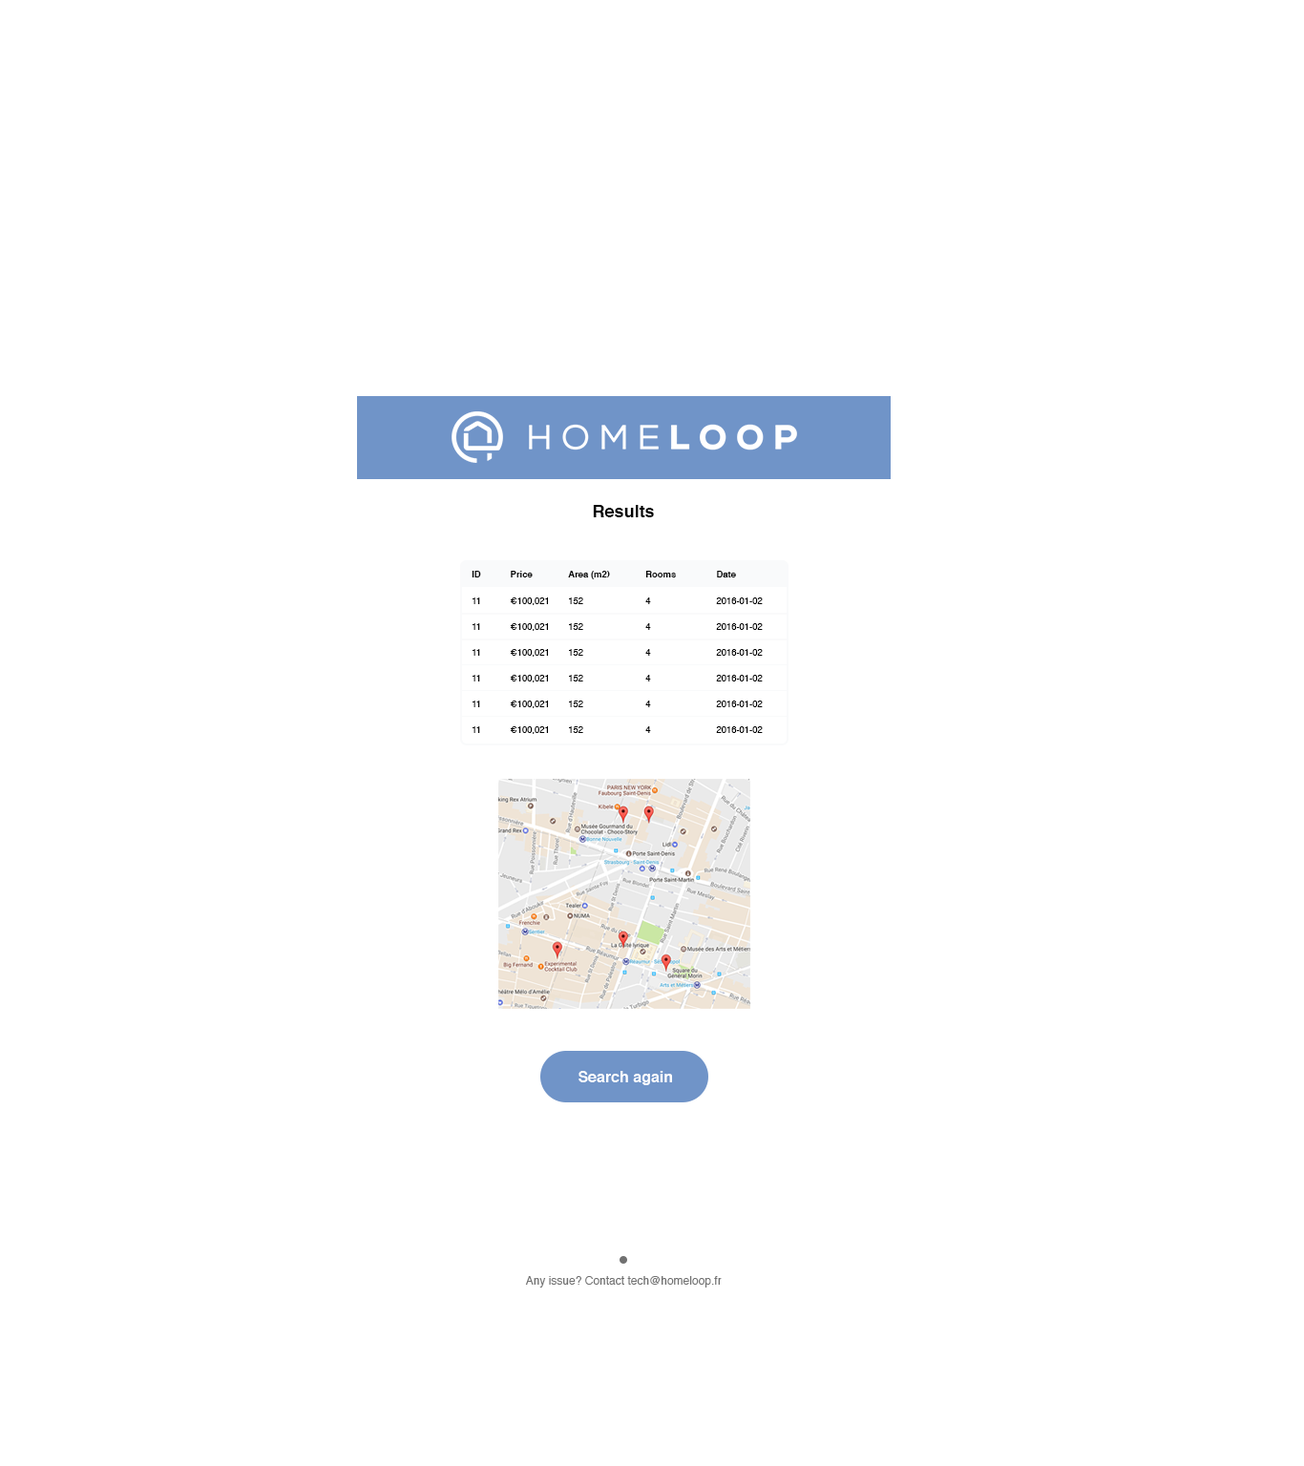
<style>
.page{position:relative;width:1304px;height:1466px;background:#ffffff}
.page>*{position:absolute;margin:0}
.t1{font:17.2px "Helvetica-Bold";color:#000000}
.t2{font:9px "Helvetica-Bold";color:#000000}
.t3{font:9px "Helvetica";color:#000000}
.t4{font:15.3px "Helvetica-Bold";color:#ffffff}
.t5{font:11.5px "Helvetica";color:#717171}
</style>
<div class="page">
<p class="t1" style="left:593px;top:505px;width:61px;height:12px">Results</p>
<p class="t2" style="left:471px;top:571px;width:10px;height:6px">ID</p>
<p class="t2" style="left:511px;top:571px;width:22px;height:6px">Price</p>
<p class="t2" style="left:568px;top:571px;width:42px;height:8px">Area (m2)</p>
<p class="t2" style="left:645px;top:571px;width:31px;height:6px">Rooms</p>
<p class="t2" style="left:717px;top:571px;width:19px;height:6px">Date</p>
<p class="t3" style="left:472px;top:597px;width:8px;height:7px">11</p>
<p class="t3" style="left:510px;top:597px;width:38px;height:8px">€100,021</p>
<p class="t3" style="left:569px;top:597px;width:14px;height:7px">152</p>
<p class="t3" style="left:645px;top:597px;width:6px;height:7px">4</p>
<p class="t3" style="left:716px;top:597px;width:47px;height:7px">2016-01-02</p>
<p class="t3" style="left:472px;top:623px;width:8px;height:7px">11</p>
<p class="t3" style="left:510px;top:623px;width:38px;height:8px">€100,021</p>
<p class="t3" style="left:569px;top:623px;width:14px;height:7px">152</p>
<p class="t3" style="left:645px;top:623px;width:6px;height:7px">4</p>
<p class="t3" style="left:716px;top:623px;width:47px;height:7px">2016-01-02</p>
<p class="t3" style="left:472px;top:649px;width:8px;height:7px">11</p>
<p class="t3" style="left:510px;top:649px;width:38px;height:8px">€100,021</p>
<p class="t3" style="left:569px;top:649px;width:14px;height:7px">152</p>
<p class="t3" style="left:645px;top:649px;width:6px;height:7px">4</p>
<p class="t3" style="left:716px;top:649px;width:47px;height:7px">2016-01-02</p>
<p class="t3" style="left:472px;top:675px;width:8px;height:6px">11</p>
<p class="t3" style="left:510px;top:675px;width:38px;height:7px">€100,021</p>
<p class="t3" style="left:569px;top:675px;width:14px;height:6px">152</p>
<p class="t3" style="left:645px;top:675px;width:6px;height:6px">4</p>
<p class="t3" style="left:716px;top:675px;width:47px;height:6px">2016-01-02</p>
<p class="t3" style="left:472px;top:700px;width:8px;height:7px">11</p>
<p class="t3" style="left:510px;top:700px;width:38px;height:8px">€100,021</p>
<p class="t3" style="left:569px;top:700px;width:14px;height:7px">152</p>
<p class="t3" style="left:645px;top:700px;width:6px;height:7px">4</p>
<p class="t3" style="left:716px;top:700px;width:47px;height:7px">2016-01-02</p>
<p class="t3" style="left:472px;top:726px;width:8px;height:7px">11</p>
<p class="t3" style="left:510px;top:726px;width:38px;height:8px">€100,021</p>
<p class="t3" style="left:569px;top:726px;width:14px;height:7px">152</p>
<p class="t3" style="left:645px;top:726px;width:6px;height:7px">4</p>
<p class="t3" style="left:716px;top:726px;width:47px;height:7px">2016-01-02</p>
<p class="t4" style="left:578px;top:1071px;width:94px;height:14px">Search again</p>
<p class="t5" style="left:525px;top:1276px;width:196px;height:11px">Any issue? Contact tech@homeloop.fr</p>
</div>
